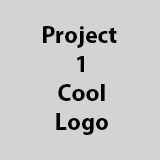
<style>
.page{position:relative;width:160px;height:160px;background:#d3d3d3}
.page>*{position:absolute;margin:0}
.t1{font:24px "MyriadPro-Bold";color:#000000}
</style>
<div class="page">
<p class="t1" style="left:43px;top:26px;width:74px;height:109px;text-align:center">Project <br>1<br>Cool<br>Logo</p>
</div>
